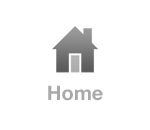
<style>
.page{position:relative;width:150px;height:130px;background:#ffffff}
.page>*{position:absolute;margin:0}
.t1{font:20px "AlteHaasGrotesk_Bold";color:#a8a8a8}
</style>
<div class="page">
<p class="t1" style="left:48px;top:85px;width:55px;height:16px">Home</p>
</div>
